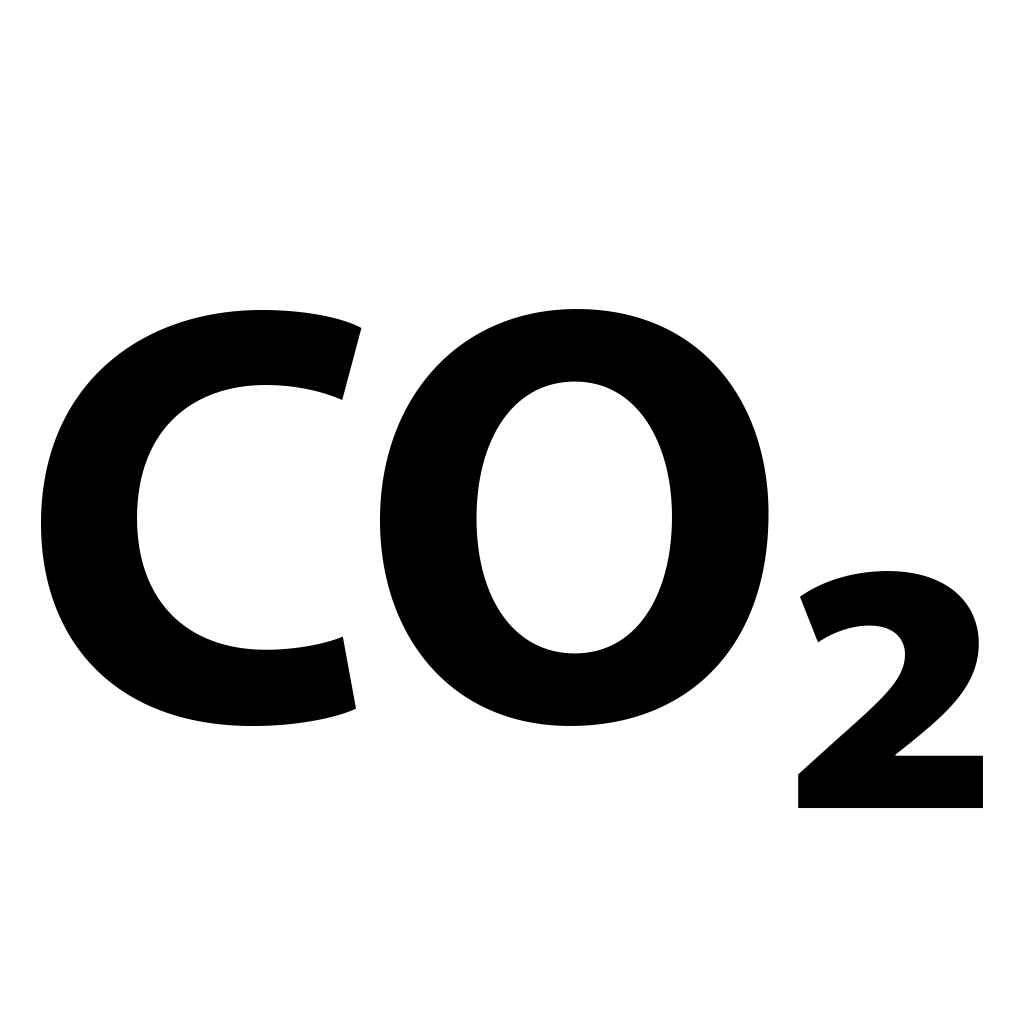
<style>
.page{position:relative;width:1024px;height:1024px;background:#ffffff}
.page>*{position:absolute;margin:0}
.t1{font:600px "MyriadPro-Bold";color:#000000}
</style>
<div class="page">
<p class="t1" style="left:41px;top:309px;width:942px;height:500px">CO2</p>
</div>
